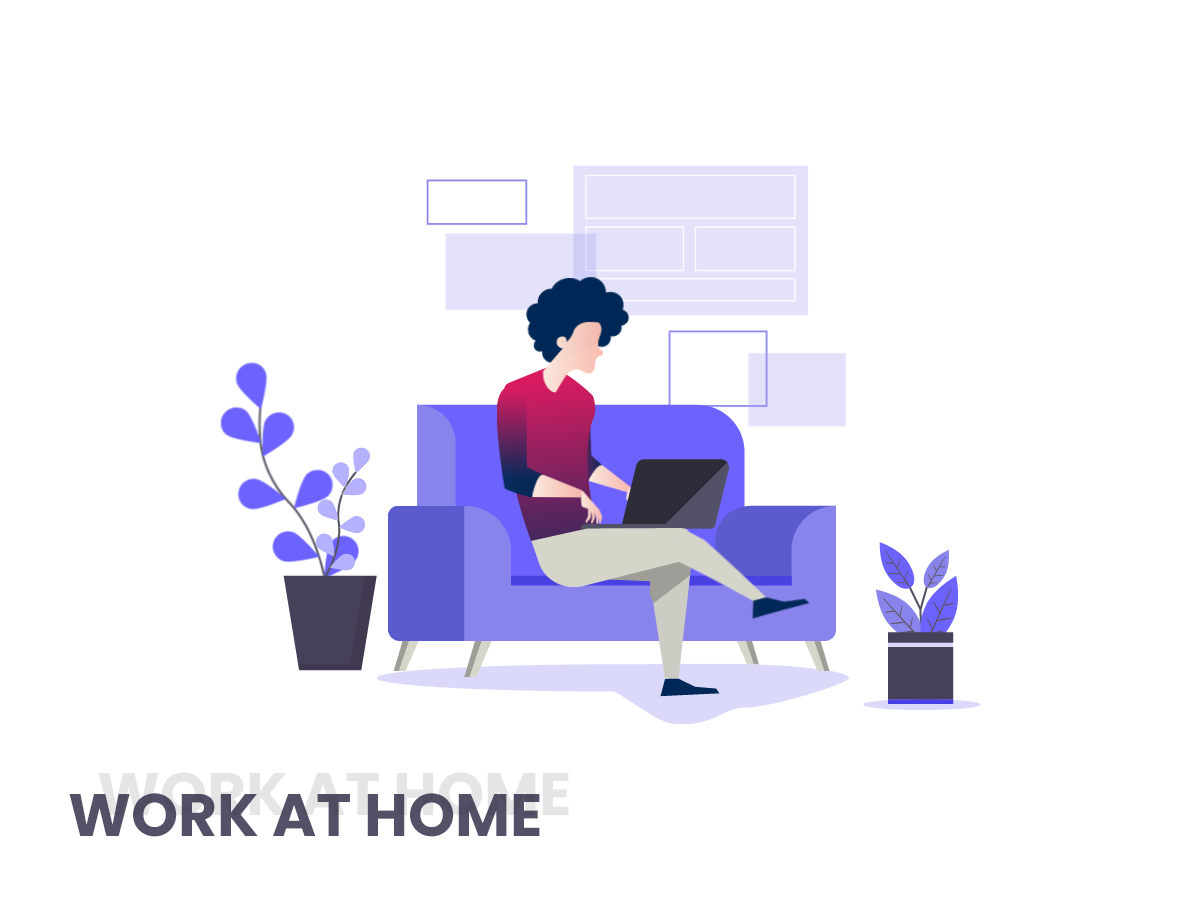
<style>
.page{position:relative;width:1200px;height:900px;background:#ffffff}
.page>*{position:absolute;margin:0}
.t1{font:60px "Poppins-Bold";color:#525168;text-transform:uppercase}
</style>
<div class="page">
<p class="t1" style="left:69px;top:793px;width:471px;height:44px">Work At Home</p>
</div>
